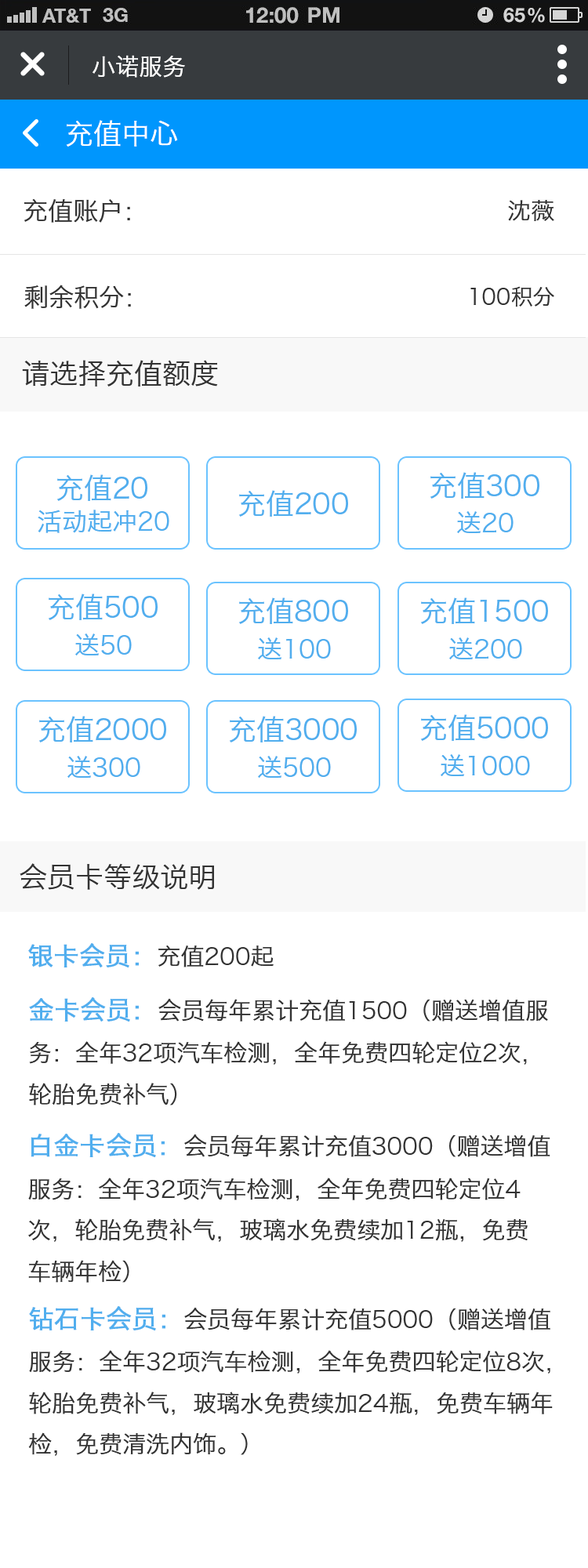
<style>
.page{position:relative;width:588px;height:1568px;background:#ffffff}
.page>*{position:absolute;margin:0}
.t1{font:23.5px "HiraginoSansGB-W3";color:#ffffff}
.t2{font:28.2px "HiraginoSansGB-W3";color:#ffffff}
.t3{font:25.1px "HiraginoSansGB-W3";color:#333333}
.t4{font:23.5px "HiraginoSansGB-W3";color:#333333}
.t5{font:22px "HiraginoSansGB-W3";color:#333333}
.t6{font:28.2px "HiraginoSansGB-W3";color:#333333}
.t7{font:28.2px "HiraginoSansGB-W3";color:#51aeee}
.t8{font:25.1px "HiraginoSansGB-W3";color:#51aeee}
.t9{font:25.1px "HiraginoSansGB-W3";color:#51aeee;font-weight:bold}
</style>
<div class="page">
<p class="t1" style="left:93px;top:55px;width:92px;height:23px">小诺服务</p>
<p class="t2" style="left:66px;top:120px;width:112px;height:27px">充值中心</p>
<p class="t3" style="left:24px;top:198px;width:106px;height:25px">充值账户：</p>
<p class="t4" style="left:508px;top:200px;width:46px;height:21px">沈薇</p>
<p class="t3" style="left:24px;top:285px;width:107px;height:24px">剩余积分：</p>
<p class="t5" style="left:470px;top:286px;width:84px;height:21px">100积分</p>
<p class="t6" style="left:22px;top:360px;width:196px;height:27px">请选择充值额度</p>
<p class="t7" style="left:430px;top:472px;width:109px;height:27px">充值300</p>
<p class="t7" style="left:56px;top:474px;width:91px;height:27px">充值20</p>
<p class="t7" style="left:238px;top:490px;width:110px;height:27px">充值200</p>
<p class="t8" style="left:38px;top:510px;width:131px;height:23px">活动起冲20</p>
<p class="t8" style="left:457px;top:511px;width:57px;height:22px">送20</p>
<p class="t7" style="left:48px;top:593px;width:110px;height:27px">充值500</p>
<p class="t7" style="left:238px;top:597px;width:110px;height:27px">充值800</p>
<p class="t7" style="left:420px;top:597px;width:128px;height:27px">充值1500</p>
<p class="t8" style="left:75px;top:633px;width:57px;height:22px">送50</p>
<p class="t8" style="left:258px;top:637px;width:73px;height:22px">送100</p>
<p class="t8" style="left:449px;top:637px;width:73px;height:22px">送200</p>
<p class="t7" style="left:38px;top:716px;width:128px;height:26px">充值2000</p>
<p class="t7" style="left:229px;top:716px;width:128px;height:26px">充值3000</p>
<p class="t7" style="left:420px;top:714px;width:128px;height:27px">充值5000</p>
<p class="t8" style="left:67px;top:756px;width:73px;height:22px">送300</p>
<p class="t8" style="left:258px;top:756px;width:73px;height:22px">送500</p>
<p class="t8" style="left:441px;top:754px;width:89px;height:22px">送1000</p>
<p class="t6" style="left:20px;top:863px;width:194px;height:27px">会员卡等级说明</p>
<p class="t4" style="left:28px;top:943px;width:246px;height:24px"><span class="t9">银卡会员：</span>充值200起</p>
<p class="t4" style="left:29px;top:997px;width:519px;height:108px"><span class="t9">金卡会员：</span>会员每年累计充值1500（赠送增值服<br>务：全年32项汽车检测，全年免费四轮定位2次，<br>轮胎免费补气）</p>
<p class="t4" style="left:28px;top:1133px;width:522px;height:150px"><span class="t9">白金卡会员：</span>会员每年累计充值3000（赠送增值<br>服务：全年32项汽车检测，全年免费四轮定位4<br>次，轮胎免费补气，玻璃水免费续加12瓶，免费<br>车辆年检）</p>
<p class="t4" style="left:28px;top:1306px;width:525px;height:150px"><span class="t9">钻石卡会员：</span>会员每年累计充值5000（赠送增值<br>服务：全年32项汽车检测，全年免费四轮定位8次，<br>轮胎免费补气，玻璃水免费续加24瓶，免费车辆年<br>检，免费清洗内饰。）</p>
</div>
